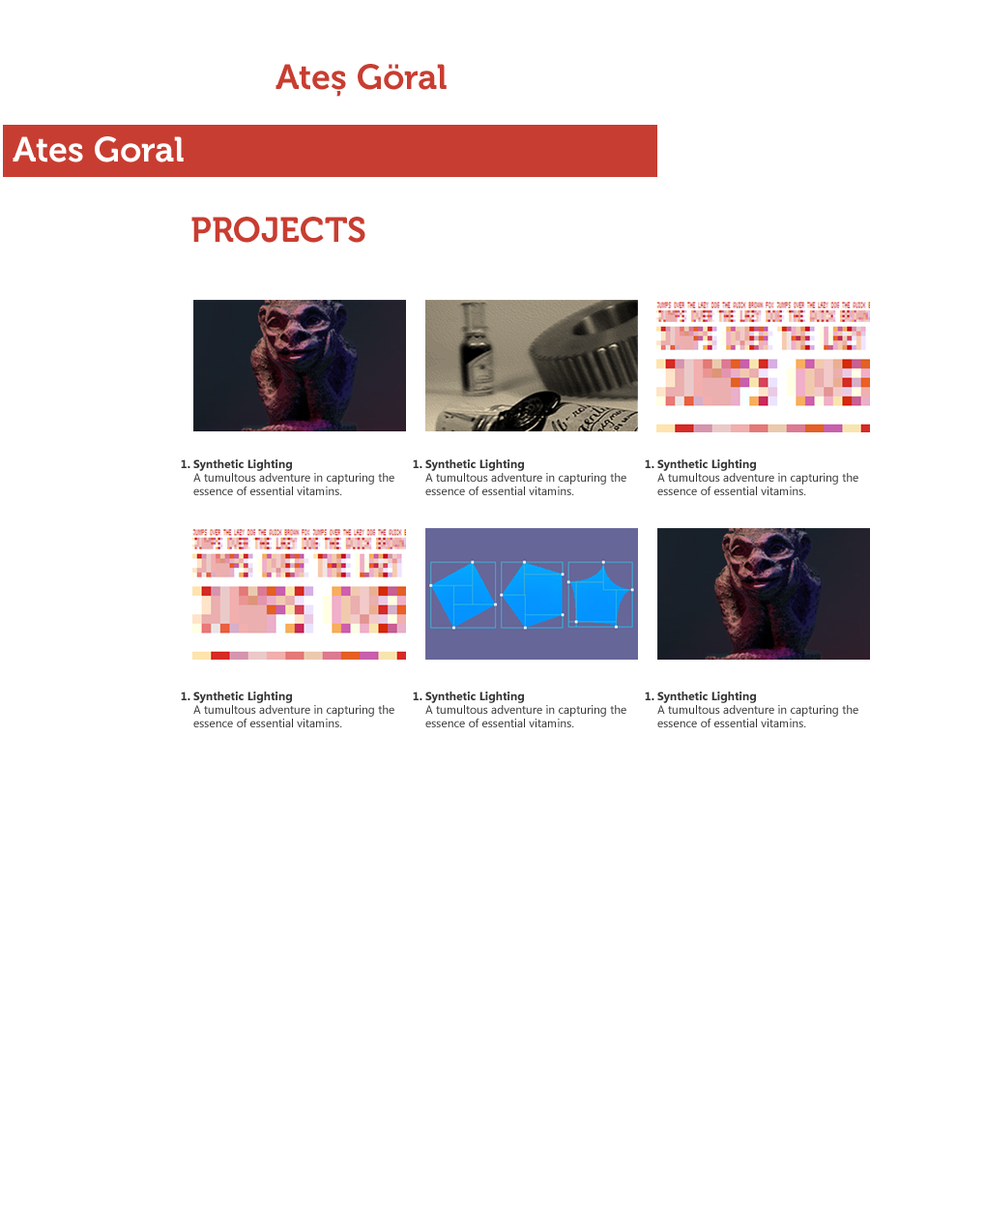
<style>
.page{position:relative;width:986px;height:1209px;background:#ffffff}
.page>*{position:absolute;margin:0}
.t1{font:34.8px "Museo-700";color:#c83d31}
.t2{font:34.8px "Museo-700";color:#ffffff}
.t3{font:11.6px "SegoeUI-Bold";color:#333333}
.t4{font:11.6px "SegoeUI";color:#000000}
.t5{font:11.6px "SegoeUI";color:#333333}
</style>
<div class="page">
<p class="t1" style="left:276px;top:64px;width:171px;height:33px">Ateş Göral</p>
<p class="t2" style="left:13px;top:136px;width:171px;height:26px">Ates Goral</p>
<p class="t1" style="left:191px;top:217px;width:175px;height:26px">PROJECTS</p>
<p class="t3" style="left:181px;top:459px;width:10px;height:9px"><span class="t4"><br><br></span>1.</p>
<p class="t5" style="left:193px;top:459px;width:202px;height:36px"><span class="t4"><br><br></span><span class="t3">Synthetic Lighting<br></span>A tumultous adventure in capturing the essence of essential vitamins.</p>
</div>
